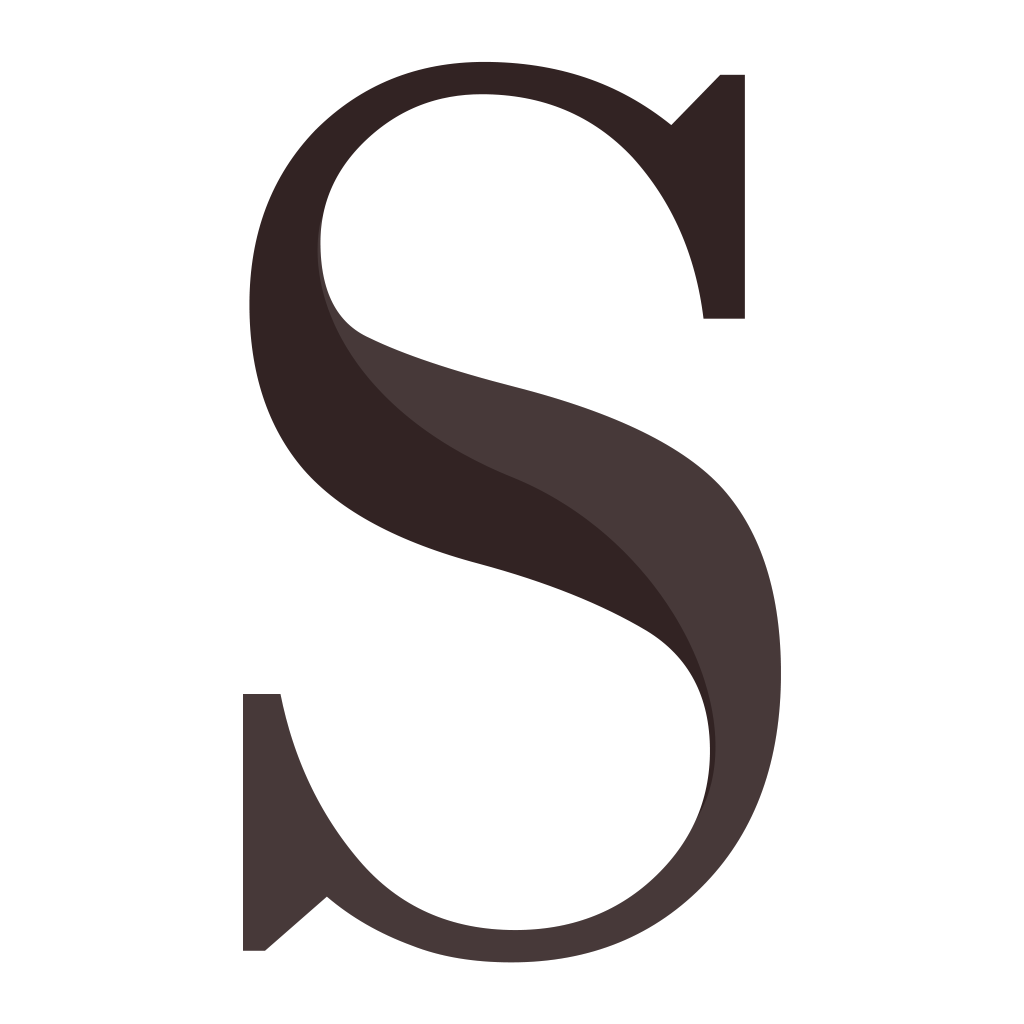
<style>
.page{position:relative;width:1024px;height:1024px;background:#ffffff}
.page>*{position:absolute;margin:0}
.t1{font:1290px "BodoniXT";letter-spacing:0.015em;color:#322323}
</style>
<div class="page">
<p class="t1" style="left:243px;top:61px;width:538px;height:902px">S</p>
</div>
